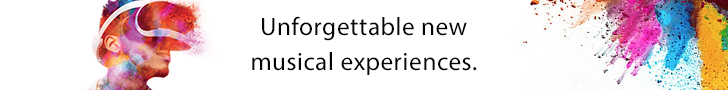
<style>
.page{position:relative;width:728px;height:90px;background:#ffffff}
.page>*{position:absolute;margin:0}
.t1{font:25.3px/35.7px "MyriadPro-Regular";letter-spacing:0.02em;color:#050404}
</style>
<div class="page">
<p class="t1" style="left:252px;top:16px;width:225px;height:59px;text-align:center">Unforgettable new<br>musical experiences.</p>
</div>
